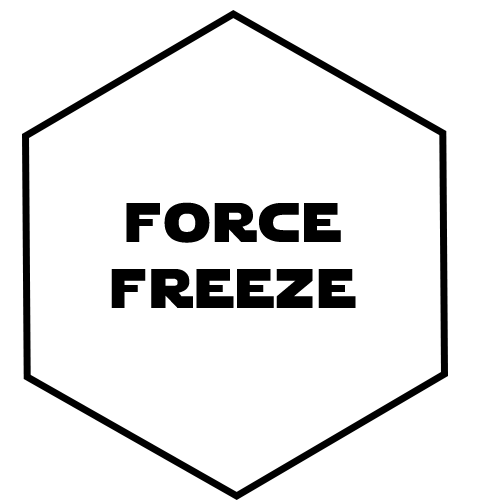
<style>
.page{position:relative;width:500px;height:500px;background:#ffffff}
.page>*{position:absolute;margin:0}
.t1{font:55px "StarJedi";letter-spacing:0.07em;color:#000000}
</style>
<div class="page">
<p class="t1" style="left:111px;top:202px;width:245px;height:106px;text-align:center">force<br>freeze</p>
</div>
